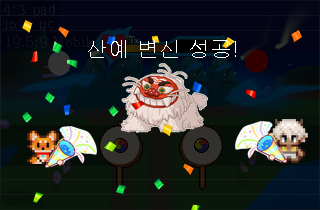
<style>
.page{position:relative;width:320px;height:210px}
.page>*{position:absolute;margin:0}
.t1{font:15px "D2Codingligature";color:#11121e}
.t2{font:22px "Gulim";color:#ffffff}
</style>
<div class="page">
<p class="t1" style="left:3px;top:4px;width:52px;height:13px">4:3 pad</p>
<p class="t2" style="left:88px;top:40px;width:148px;height:18px">산예 변신 성공!</p>
</div>
